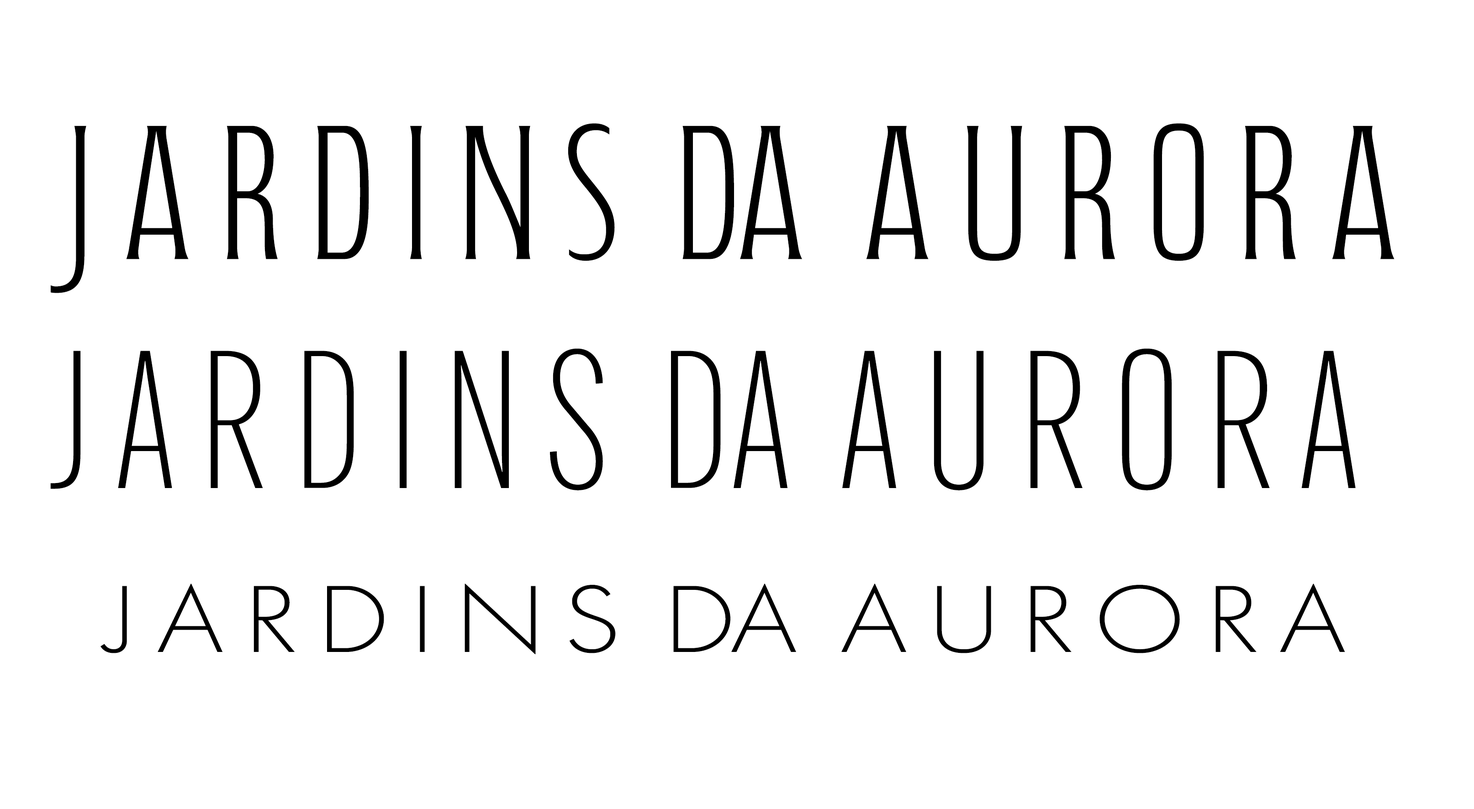
<style>
.page{position:relative;width:1474px;height:809px;background:#ffffff}
.page>*{position:absolute;margin:0}
.t1{font:191.8px "FabiolaCapitals-Thin";color:#000000;scale:1.18 1}
.t2{font:191.8px "AlternateGothicExCondATF-Light";color:#000000;scale:1.18 1}
.t3{font:87.5px "Futura100LXT-Light";color:#000000;scale:1.18 1}
</style>
<div class="page">
<p class="t1" style="left:51px;top:123px;width:1343px;height:170px">J A R D I N S  DA  A U R O R A</p>
<p class="t2" style="left:50px;top:348px;width:1305px;height:142px">J A R D I N S  DA  A U R O R A</p>
<p class="t3" style="left:100px;top:584px;width:1245px;height:70px">J A R D I N S  DA  A U R O R A</p>
</div>
